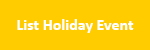
<style>
.page{position:relative;width:150px;height:50px;background:#ffcc00}
.page>*{position:absolute;margin:0}
.t1{font:16px "Calibri-Bold";color:#ffffff}
</style>
<div class="page">
<p class="t1" style="left:17px;top:19px;width:117px;height:14px">List Holiday Event</p>
</div>
